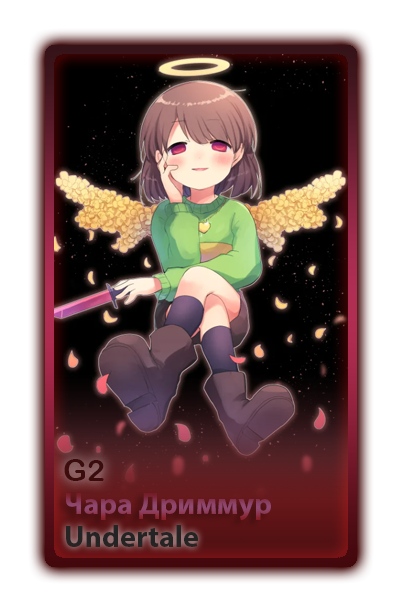
<style>
.page{position:relative;width:402px;height:603px}
.page>*{position:absolute;margin:0}
.t1{font:30px "ArialRoundedMTBold";color:#3b0c0c}
.t2{font:30px "MyriadPro-Bold";color:#8d3f60}
.t3{font:30px "MyriadPro-Bold";color:#242424}
</style>
<div class="page">
<p class="t1" style="left:64px;top:459px;width:40px;height:22px">G2</p>
<p class="t2" style="left:66px;top:493px;width:205px;height:28px">Чара Дриммур</p>
<p class="t3" style="left:66px;top:525px;width:132px;height:22px">Undertale</p>
</div>
